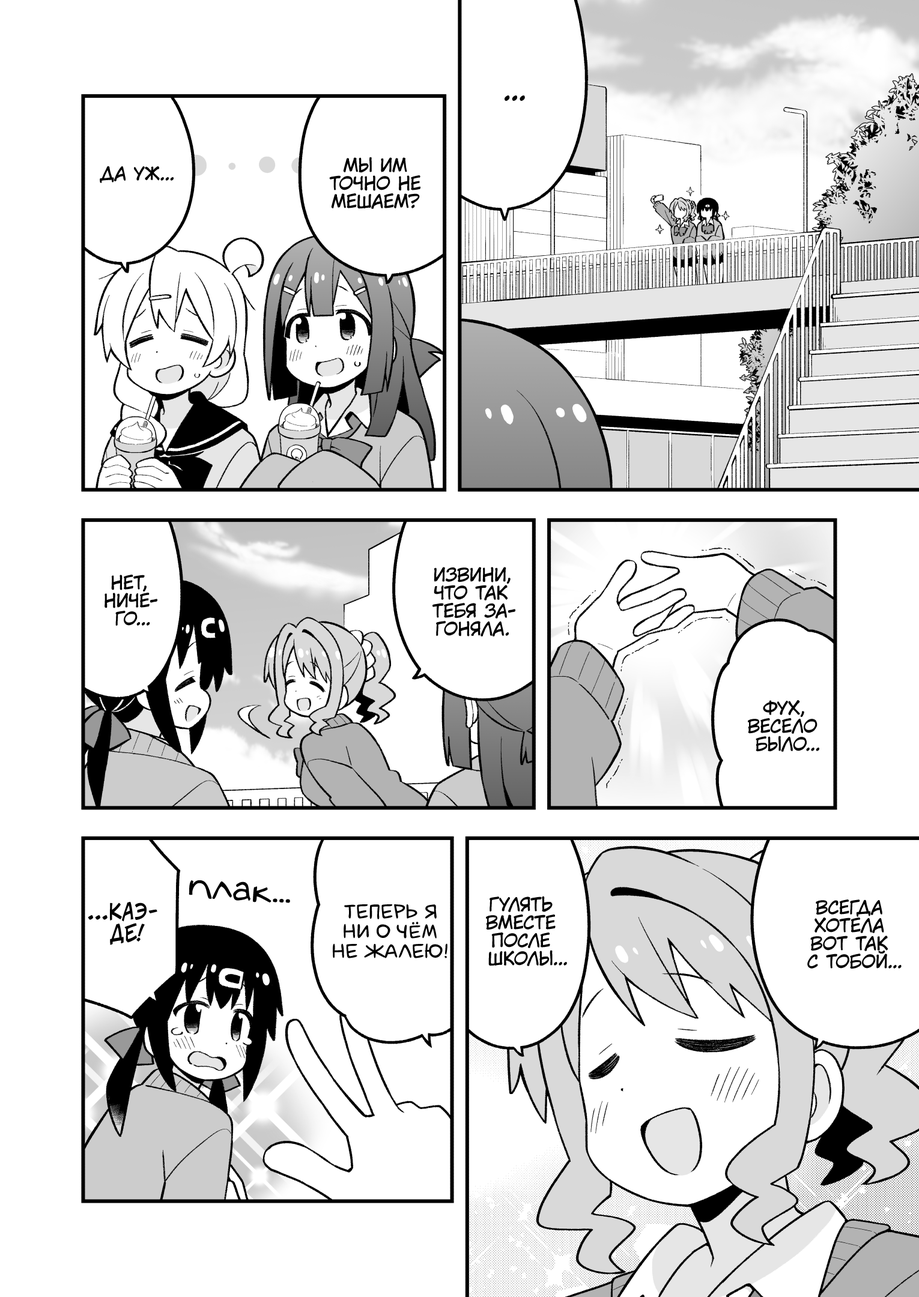
<style>
.page{position:relative;width:919px;height:1297px;background:#ffffff}
.page>*{position:absolute;margin:0}
.t1{font:28.8px "KuraiVoice2";color:#000000;text-transform:uppercase}
.t2{font:18px "KuraiVoice2";color:#000000;text-transform:uppercase}
.t3{font:36px "v_Augie";color:#000000}
.t4{font:21.6px "v_CCJeffCampbell";color:#000000;text-transform:uppercase}
.t5{font:19.8px "laCartoonerie";color:#000000;text-transform:uppercase}
</style>
<div class="page">
<p class="t1" style="left:505px;top:96px;width:20px;height:5px">...</p>
<p class="t2" style="left:329px;top:157px;width:91px;height:52px;text-align:center">Мы им<br>точно не<br>мешаем?</p>
<p class="t2" style="left:100px;top:166px;width:74px;height:17px">Да уж...</p>
<p class="t2" style="left:432px;top:567px;width:83px;height:70px;text-align:center">Извини,<br>что так<br>тебя за-<br>гоняла.</p>
<p class="t2" style="left:105px;top:575px;width:52px;height:51px;text-align:center">Нет,<br>ниче-<br>го...</p>
<p class="t2" style="left:748px;top:700px;width:71px;height:52px;text-align:center">Фух,<br>весело<br>было...</p>
<p class="t3" style="left:189px;top:881px;width:101px;height:22px;rotate:3deg">плак...</p>
<p class="t4" style="left:88px;top:902px;width:69px;height:43px;text-align:center">...Каэ-<br>де!</p>
<p class="t5" style="left:333px;top:904px;width:115px;height:55px;text-align:center">Теперь я<br>ни о чём<br>не жалею!</p>
<p class="t2" style="left:486px;top:896px;width:81px;height:70px;text-align:center">Гулять<br>вместе<br>после<br>школы...</p>
<p class="t2" style="left:807px;top:900px;width:95px;height:70px;text-align:center">Всегда<br>хотела<br>вот так<br>с тобой...</p>
</div>
